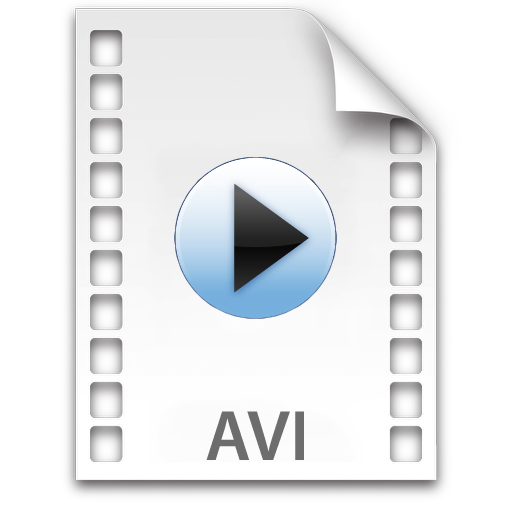
<style>
.page{position:relative;width:512px;height:512px;background:#ffffff}
.page>*{position:absolute;margin:0}
.t1{font:72px "MyriadPro-Semibold";color:#6e6d6d}
</style>
<div class="page">
<p class="t1" style="left:206px;top:411px;width:98px;height:49px">AVI</p>
</div>
